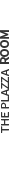
<style>
.page{position:relative;width:9px;height:182px;background:#ffffff}
.page>*{position:absolute;margin:0}
.t1{font:10.9px "NotoSansCJKkr-Regular";letter-spacing:-0.025em;color:#343434;scale:1.08 1}
.t2{font:10.9px "NotoSansCJKkr-Bold";letter-spacing:-0.025em;color:#343434;scale:1.08 1}
</style>
<div class="page">
<p class="t1" style="left:0px;top:30px;width:9px;height:103px;rotate:-90deg">THE PLAZZA  <span class="t2">ROOM</span></p>
</div>
